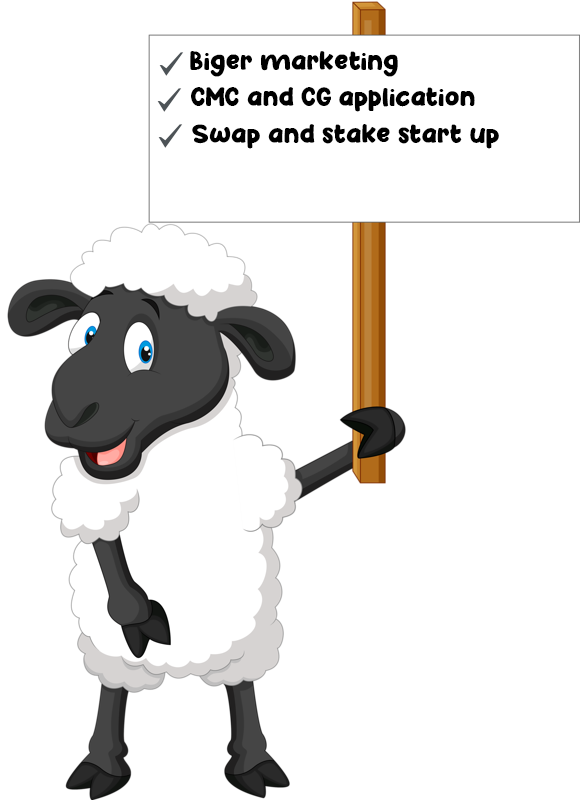
<style>
.page{position:relative;width:586px;height:800px;background:#ffffff}
.page>*{position:absolute;margin:0}
.t1{font:25px "Happy-School";color:#000000}
</style>
<div class="page">
<p class="t1" style="left:190px;top:51px;width:208px;height:26px">Biger marketing</p>
<p class="t1" style="left:191px;top:87px;width:284px;height:25px">CMC and CG application</p>
<p class="t1" style="left:192px;top:124px;width:307px;height:25px">Swap and stake start up</p>
</div>
